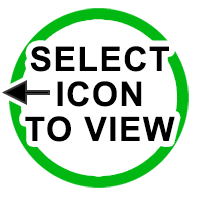
<style>
.page{position:relative;width:200px;height:200px;background:#ffffff}
.page>*{position:absolute;margin:0}
.t1{font:33.8px/35px "Arial-BoldMT";letter-spacing:0.04em;color:#000000}
</style>
<div class="page">
<p class="t1" style="left:25px;top:46px;width:150px;height:96px;text-align:center">SELECT<br>ICON<br>TO VIEW</p>
</div>
